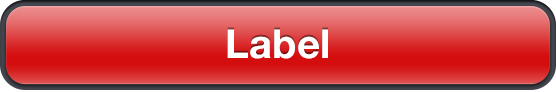
<style>
.page{position:relative;width:556px;height:92px}
.page>*{position:absolute;margin:0}
.t1{font:40px "HelveticaNeue-Bold";letter-spacing:0.005em;color:#ffffff}
</style>
<div class="page">
<p class="t1" style="left:227px;top:29px;width:101px;height:30px">Label</p>
</div>
